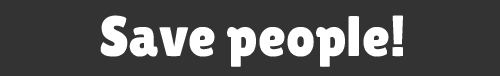
<style>
.page{position:relative;width:500px;height:76px;background:#333333}
.page>*{position:absolute;margin:0}
.t1{font:57px "LilitaOne";color:#ffffff}
</style>
<div class="page">
<p class="t1" style="left:100px;top:15px;width:303px;height:52px">Save people!</p>
</div>
